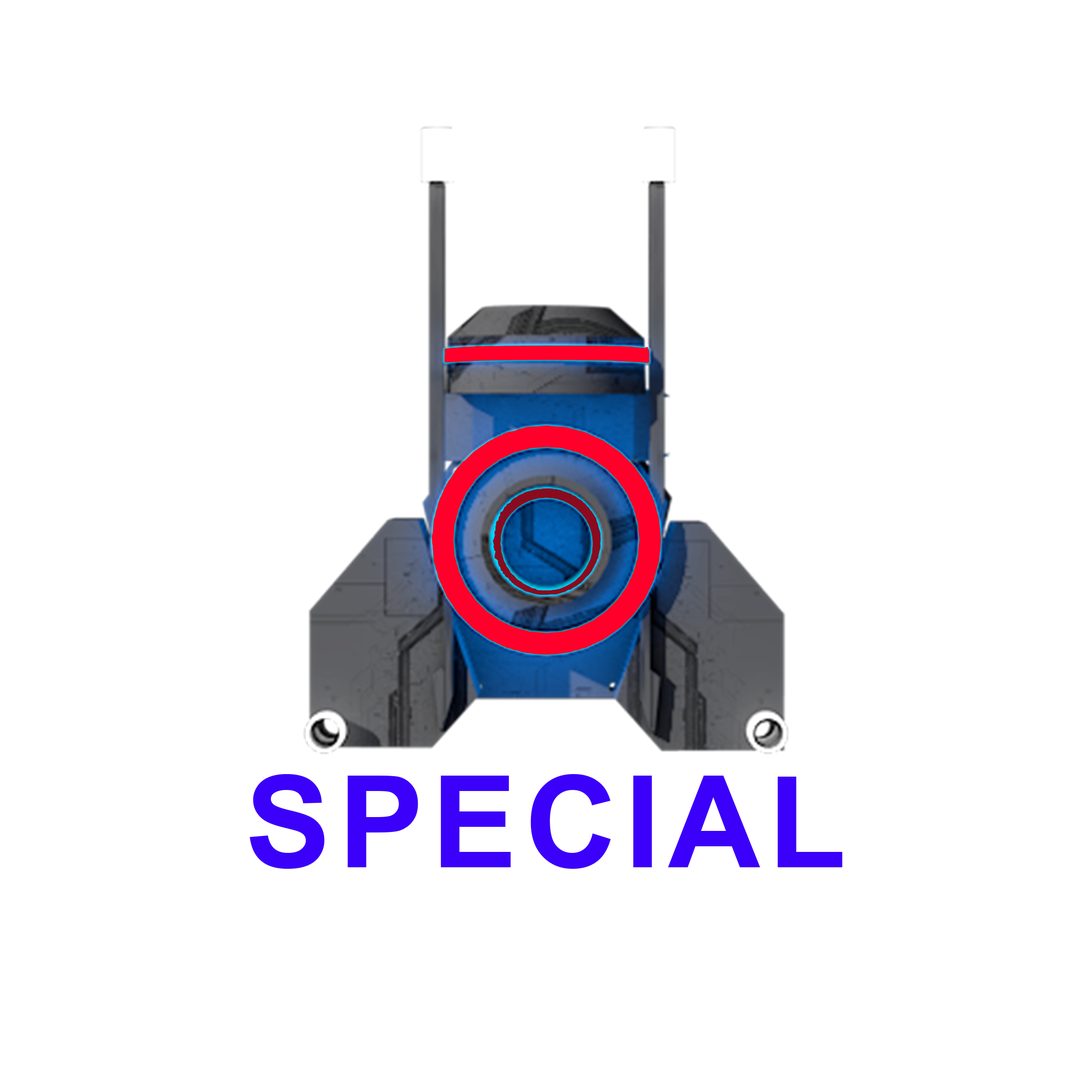
<style>
.page{position:relative;width:1092px;height:1092px;background:#ffffff}
.page>*{position:absolute;margin:0}
.t1{font:128px "Arial-BoldMT";letter-spacing:0.025em;color:#3b00f9;text-transform:uppercase}
</style>
<div class="page">
<p class="t1" style="left:249px;top:774px;width:594px;height:95px">Special</p>
</div>
